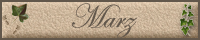
<style>
.page{position:relative;width:200px;height:40px}
.page>*{position:absolute;margin:0}
.t1{font:34px "EdwardianScriptITC";color:#62574b}
</style>
<div class="page">
<p class="t1" style="left:72px;top:3px;width:65px;height:35px">Marz</p>
</div>
